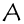
<style>
.page{position:relative;width:24px;height:24px;background:#ffffff}
.page>*{position:absolute;margin:0}
.t1{font:24px "TempusSansITC";color:#000000}
</style>
<div class="page">
<p class="t1" style="left:2px;top:3px;width:19px;height:19px">A</p>
</div>
